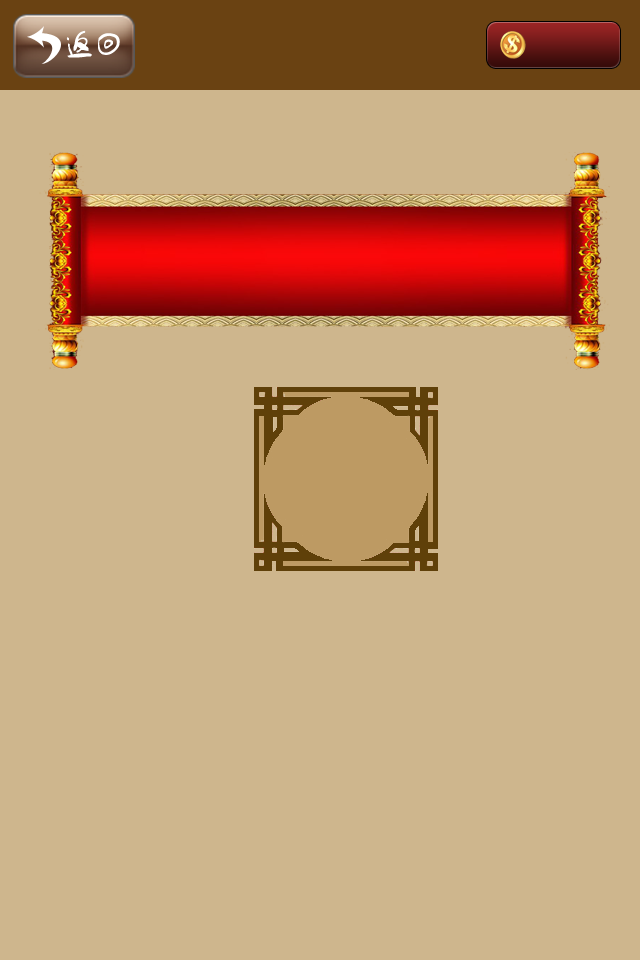
<style>
.page{position:relative;width:640px;height:960px;background:#ceb68d}
.page>*{position:absolute;margin:0}
.t1{font:30px "FZZJ-TTMBFONT";letter-spacing:-0.02em;color:#ffffff}
</style>
<div class="page">
<p class="t1" style="left:66px;top:30px;width:54px;height:28px">返回</p>
</div>
